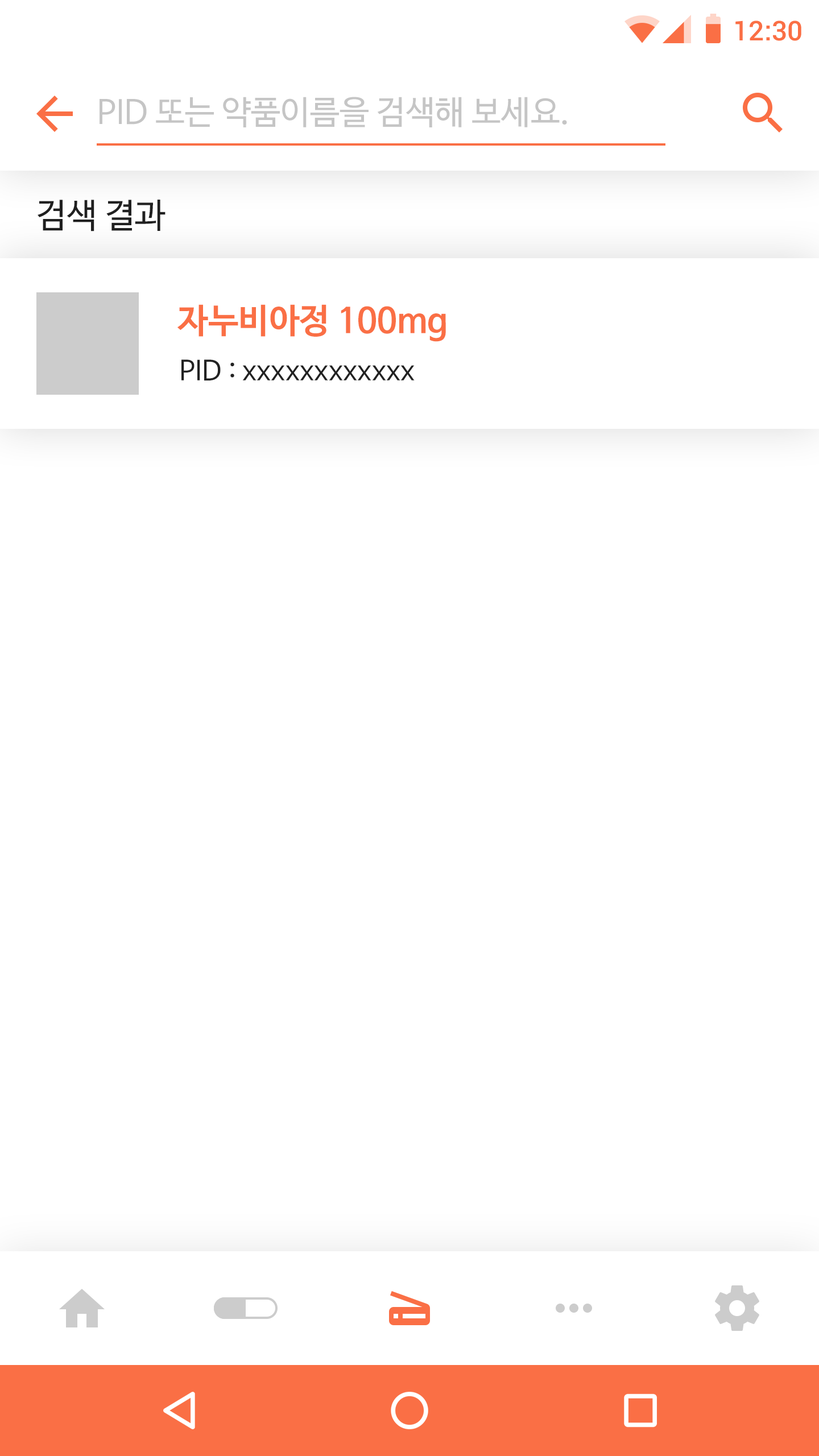
<style>
.page{position:relative;width:819px;height:1456px;background:#ffffff}
.page>*{position:absolute;margin:0}
.t1{font:27.3px "Roboto-Medium";color:#fa6f45}
.t2{font:33px "NanumBarunGothic";color:#c5c5c5}
.t3{font:34.1px "NanumBarunGothic";color:#202020}
.t4{font:34.1px "NanumBarunGothicBold";color:#fa6f45}
.t5{font:27.3px "NanumBarunGothic";color:#222222}
</style>
<div class="page">
<p class="t1" style="left:735px;top:20px;width:66px;height:21px">12:30</p>
<p class="t2" style="left:100px;top:97px;width:467px;height:30px">PID 또는 약품이름을 검색해 보세요.</p>
<p class="t3" style="left:38px;top:200px;width:128px;height:31px">검색 결과</p>
<p class="t4" style="left:177px;top:304px;width:269px;height:38px">자누비아정 100mg</p>
<p class="t5" style="left:181px;top:359px;width:234px;height:21px">PID : xxxxxxxxxxxx</p>
</div>
